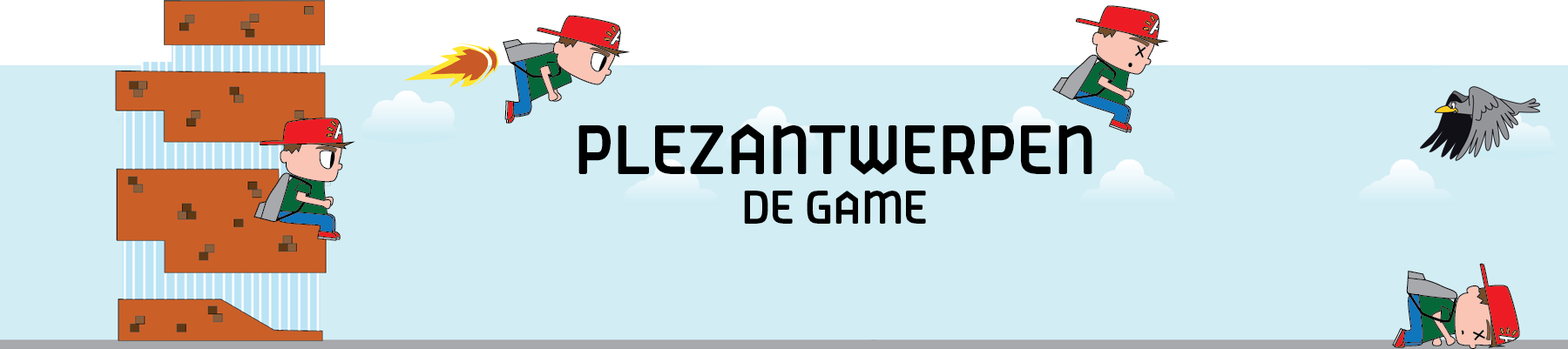
<style>
.page{position:relative;width:1568px;height:349px;background:#d2edf4}
.page>*{position:absolute;margin:0}
.t1{font:62.7px "Antwerpen-Regular";color:#000000}
.t2{font:41.8px "Antwerpen-Regular";color:#000000}
</style>
<div class="page">
<p class="t1" style="left:578px;top:124px;width:514px;height:100px;text-align:center">PLEZANTWERPEN<br><span class="t2">DE GAME</span></p>
</div>
